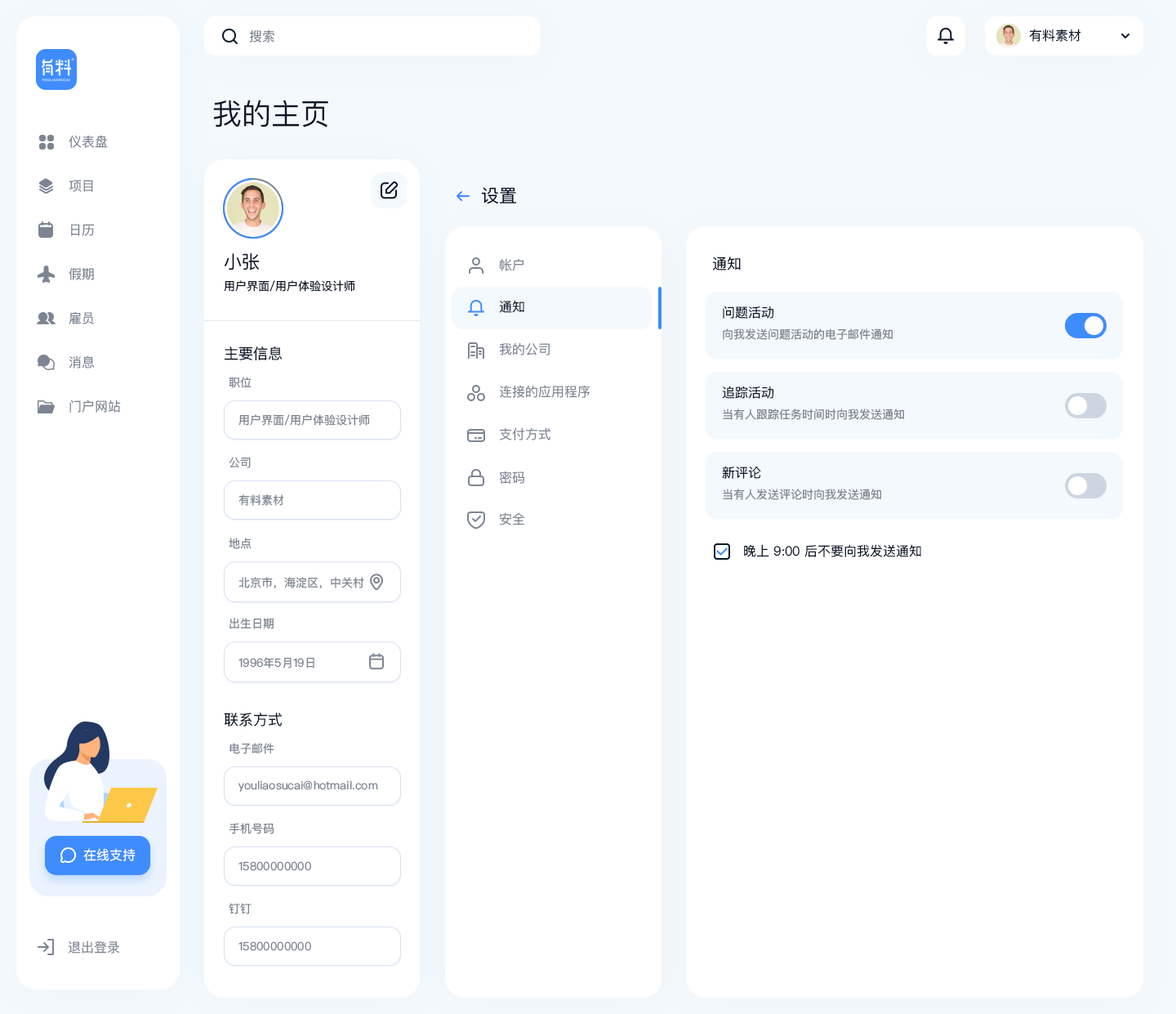
<style>
.page{position:relative;width:1176px;height:1014px;background:#ffffff}
.page>*{position:absolute;margin:0}
.t1{font:13.1px "PingFangSC-Regular";color:#7d8592}
.t2{font:13.1px "PingFangSC-Regular";color:#0a1629}
.t3{font:29.4px "PingFangSC-Regular";color:#0a1629}
.t4{font:18px "PingFangSC-Regular";color:#0a1629}
.t5{font:14.7px "PingFangSC-Regular";color:#0a1629}
.t6{font:11.4px "PingFangSC-Regular";color:#0a1629}
.t7{font:11.4px "PingFangSC-Regular";color:#7d8592}
.t8{font:13.1px "PingFangSC-Regular";color:#ffffff}
</style>
<div class="page">
<p class="t1" style="left:249px;top:29px;width:25px;height:13px">搜索</p>
<p class="t2" style="left:1029px;top:29px;width:53px;height:13px">有料素材</p>
<p class="t3" style="left:213px;top:100px;width:115px;height:27px">我的主页</p>
<p class="t1" style="left:69px;top:135px;width:39px;height:13px">仪表盘</p>
<p class="t1" style="left:69px;top:180px;width:24px;height:12px">项目</p>
<p class="t4" style="left:481px;top:187px;width:35px;height:17px">设置</p>
<p class="t1" style="left:71px;top:224px;width:23px;height:12px">日历</p>
<p class="t4" style="left:224px;top:252px;width:36px;height:18px">小张</p>
<p class="t5" style="left:712px;top:256px;width:29px;height:14px">通知</p>
<p class="t1" style="left:69px;top:267px;width:25px;height:13px">假期</p>
<p class="t1" style="left:500px;top:258px;width:24px;height:13px">帐户</p>
<p class="t6" style="left:224px;top:280px;width:131px;height:12px">用户界面/用户体验设计师</p>
<p class="t2" style="left:499px;top:300px;width:25px;height:13px">通知</p>
<p class="t2" style="left:723px;top:306px;width:51px;height:13px">问题活动</p>
<p class="t1" style="left:69px;top:311px;width:25px;height:13px">雇员</p>
<p class="t7" style="left:723px;top:328px;width:170px;height:12px">向我发送问题活动的电子邮件通知</p>
<p class="t5" style="left:224px;top:346px;width:59px;height:14px">主要信息</p>
<p class="t1" style="left:499px;top:342px;width:51px;height:13px">我的公司</p>
<p class="t1" style="left:69px;top:355px;width:26px;height:13px">消息</p>
<p class="t7" style="left:229px;top:377px;width:23px;height:11px">职位</p>
<p class="t1" style="left:499px;top:385px;width:92px;height:13px">连接的应用程序</p>
<p class="t2" style="left:722px;top:386px;width:52px;height:13px">追踪活动</p>
<p class="t1" style="left:69px;top:399px;width:52px;height:14px">门户网站</p>
<p class="t7" style="left:723px;top:408px;width:181px;height:12px">当有人跟踪任务时间时向我发送通知</p>
<p class="t7" style="left:239px;top:414px;width:131px;height:12px">用户界面/用户体验设计师</p>
<p class="t1" style="left:499px;top:427px;width:52px;height:13px">支付方式</p>
<p class="t7" style="left:229px;top:457px;width:22px;height:11px">公司</p>
<p class="t1" style="left:499px;top:471px;width:25px;height:13px">密码</p>
<p class="t2" style="left:722px;top:466px;width:39px;height:13px">新评论</p>
<p class="t7" style="left:239px;top:494px;width:45px;height:12px">有料素材</p>
<p class="t7" style="left:723px;top:488px;width:158px;height:12px">当有人发送评论时向我发送通知</p>
<p class="t1" style="left:499px;top:512px;width:26px;height:13px">安全</p>
<p class="t7" style="left:229px;top:537px;width:23px;height:12px">地点</p>
<p class="t2" style="left:744px;top:544px;width:177px;height:13px">晚上 9:00 后不要向我发送通知</p>
<p class="t7" style="left:239px;top:577px;width:125px;height:12px">北京市，海淀区，中关村</p>
<p class="t7" style="left:230px;top:618px;width:44px;height:11px">出生日期</p>
<p class="t7" style="left:239px;top:657px;width:75px;height:11px">1996年5月19日</p>
<p class="t5" style="left:224px;top:712px;width:59px;height:14px">联系方式</p>
<p class="t7" style="left:230px;top:743px;width:44px;height:11px">电子邮件</p>
<p class="t7" style="left:239px;top:780px;width:139px;height:12px">youliaosucai@hotmail.com</p>
<p class="t7" style="left:229px;top:823px;width:45px;height:11px">手机号码</p>
<p class="t8" style="left:83px;top:848px;width:53px;height:13px">在线支持</p>
<p class="t7" style="left:239px;top:861px;width:72px;height:10px">15800000000</p>
<p class="t7" style="left:229px;top:903px;width:23px;height:11px">钉钉</p>
<p class="t1" style="left:68px;top:940px;width:51px;height:13px">退出登录</p>
<p class="t7" style="left:239px;top:941px;width:72px;height:10px">15800000000</p>
</div>
